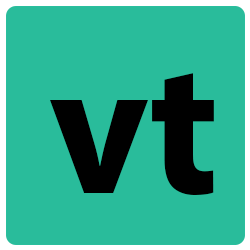
<style>
.page{position:relative;width:250px;height:250px;background:#29bc9b}
.page>*{position:absolute;margin:0}
.t1{font:191.3px "MyriadPro-Bold";color:#000000}
</style>
<div class="page">
<p class="t1" style="left:50px;top:73px;width:164px;height:123px">vt</p>
</div>
